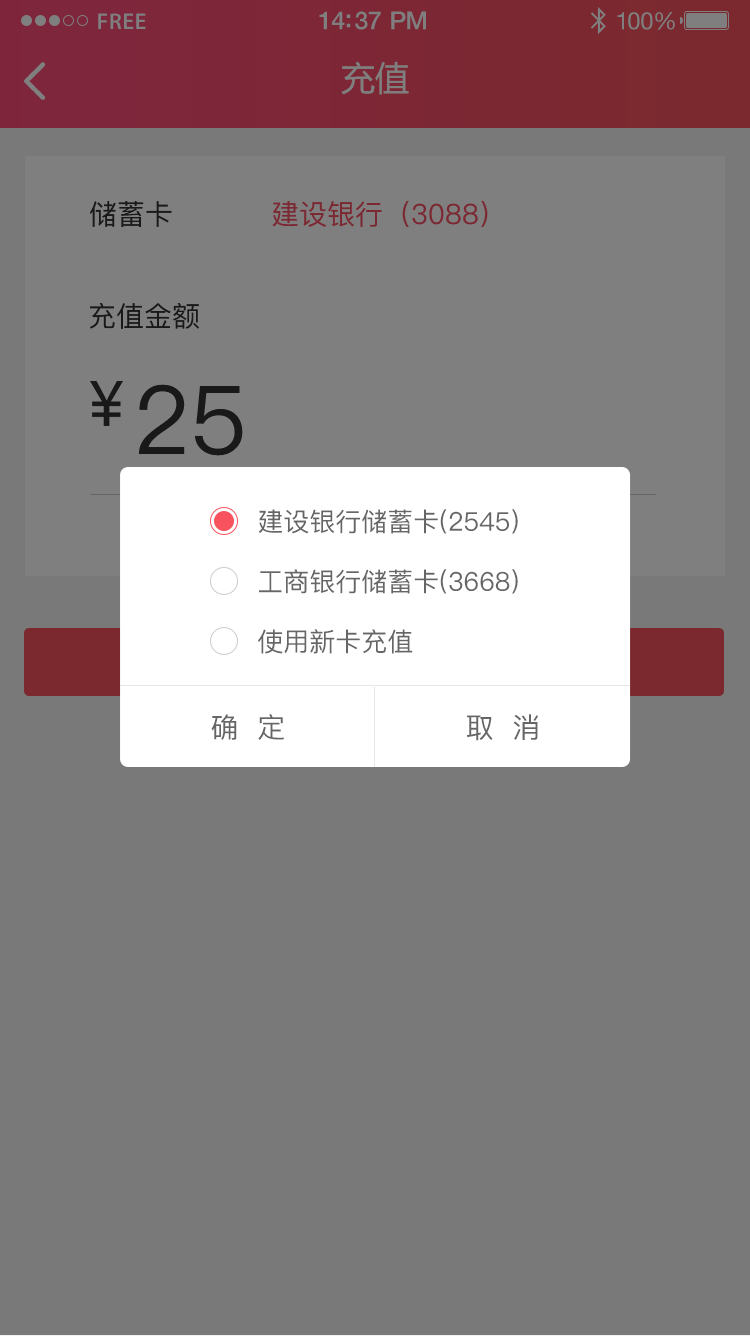
<style>
.page{position:relative;width:750px;height:1336px;background:#797979}
.page>*{position:absolute;margin:0}
.t1{font:23px "MyriadPro-Semibold";letter-spacing:0.02em;color:#7f7f7f}
.t2{font:25px "HelveticaNeue-Medium";letter-spacing:-0.02em;color:#7f7f7f}
.t3{font:24px "HelveticaNeue";letter-spacing:-0.02em;color:#7f7f7f}
.t4{font:34px "MicrosoftYaHei";color:#7f7f7f;text-transform:uppercase}
.t5{font:28px "PingFang-SC-Medium";color:#191919;text-transform:uppercase}
.t6{font:28px "PingFang-SC-Medium";color:#7c2833;text-transform:uppercase}
.t7{font:95.2px "PingFang-SC-Medium";color:#191919;text-transform:uppercase}
.t8{font:26px "PingFang-SC-Medium";color:#666666;text-transform:uppercase}
.t9{font:28px "PingFang-SC-Medium";color:#666666;text-transform:uppercase}
</style>
<div class="page">
<p class="t1" style="left:98px;top:13px;width:48px;height:16px">FREE</p>
<p class="t2" style="left:319px;top:11px;width:107px;height:19px">14:37 PM</p>
<p class="t3" style="left:617px;top:12px;width:58px;height:18px">100%</p>
<p class="t4" style="left:341px;top:61px;width:68px;height:34px">充值</p>
<p class="t5" style="left:90px;top:201px;width:82px;height:26px">储蓄卡</p>
<p class="t6" style="left:272px;top:200px;width:216px;height:27px">建设银行（3088）</p>
<p class="t5" style="left:90px;top:303px;width:109px;height:26px">充值金额</p>
<p class="t7" style="left:138px;top:384px;width:105px;height:72px">25</p>
<p class="t8" style="left:258px;top:509px;width:260px;height:25px">建设银行储蓄卡(2545)</p>
<p class="t8" style="left:259px;top:569px;width:259px;height:25px">工商银行储蓄卡(3668)</p>
<p class="t8" style="left:258px;top:629px;width:155px;height:25px">使用新卡充值</p>
<p class="t9" style="left:211px;top:714px;width:73px;height:26px">确  定</p>
<p class="t9" style="left:467px;top:714px;width:71px;height:27px">取  消</p>
</div>
